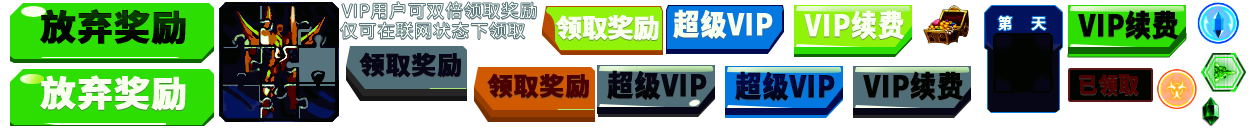
<style>
.page{position:relative;width:1248px;height:128px;background:#ffffff}
.page>*{position:absolute;margin:0}
.t1{font:17.8px "SourceHanSansCN-Normal";letter-spacing:0.02em;color:#fcfff8;font-weight:bold}
.t2{font:35.2px "SourceHanSansCN-Heavy";letter-spacing:0.02em;color:#0d220e;font-weight:bold}
.t3{font:25.4px "SourceHanSansCN-Heavy";letter-spacing:-0.04em;color:#fcfff8;font-weight:bold;scale:1.03 1}
.t4{font:29.5px "SourceHanSansCN-Heavy";letter-spacing:0.02em;color:#fcfff8;font-weight:bold;scale:0.87 1}
.t5{font:15.7px "SourceHanSansCN-Heavy";letter-spacing:0.02em;color:#fcfff8;font-weight:bold}
.t6{font:29.5px "SourceHanSansCN-Heavy";letter-spacing:0.02em;color:#0d220e;font-weight:bold;scale:0.87 1}
.t7{font:24.7px "SourceHanSansCN-Heavy";letter-spacing:0.02em;color:#302e53;font-weight:bold}
.t8{font:35.2px "SourceHanSansCN-Heavy";letter-spacing:0.02em;color:#fcfff8;font-weight:bold}
.t9{font:24.7px "SourceHanSansCN-Heavy";letter-spacing:0.02em;color:#94140a;font-weight:bold}
.t10{font:29.5px "SourceHanSansCN-Heavy";letter-spacing:0.02em;color:#302e53;font-weight:bold;scale:0.87 1}
.t11{font:29.5px "SourceHanSansCN-Heavy";letter-spacing:0.02em;color:#053997;font-weight:bold;scale:0.87 1}
</style>
<div class="page">
<p class="t1" style="left:341px;top:1px;width:196px;height:18px">VIP用户可双倍领取奖励</p>
<p class="t2" style="left:40px;top:9px;width:146px;height:36px">放弃奖励</p>
<p class="t3" style="left:555px;top:14px;width:104px;height:27px">领取奖励</p>
<p class="t4" style="left:673px;top:9px;width:100px;height:30px">超级VIP</p>
<p class="t4" style="left:804px;top:10px;width:100px;height:30px">VIP续费</p>
<p class="t5" style="left:997px;top:15px;width:50px;height:16px">第    天</p>
<p class="t6" style="left:1078px;top:10px;width:100px;height:30px">VIP续费</p>
<p class="t1" style="left:340px;top:22px;width:185px;height:17px">仅可在联网状态下领取</p>
<p class="t7" style="left:359px;top:52px;width:102px;height:26px">领取奖励</p>
<p class="t8" style="left:40px;top:75px;width:146px;height:36px">放弃奖励</p>
<p class="t9" style="left:487px;top:73px;width:102px;height:26px">领取奖励</p>
<p class="t10" style="left:607px;top:70px;width:100px;height:30px">超级VIP</p>
<p class="t11" style="left:735px;top:71px;width:100px;height:30px">超级VIP</p>
<p class="t6" style="left:863px;top:71px;width:100px;height:30px">VIP续费</p>
</div>
